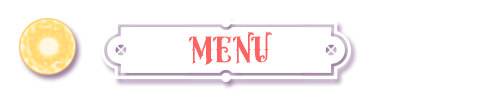
<style>
.page{position:relative;width:484px;height:106px;background:#ffffff}
.page>*{position:absolute;margin:0}
.t1{font:41.7px "Moyers";color:#ff6262}
</style>
<div class="page">
<p class="t1" style="left:189px;top:31px;width:83px;height:34px">MENU</p>
</div>
